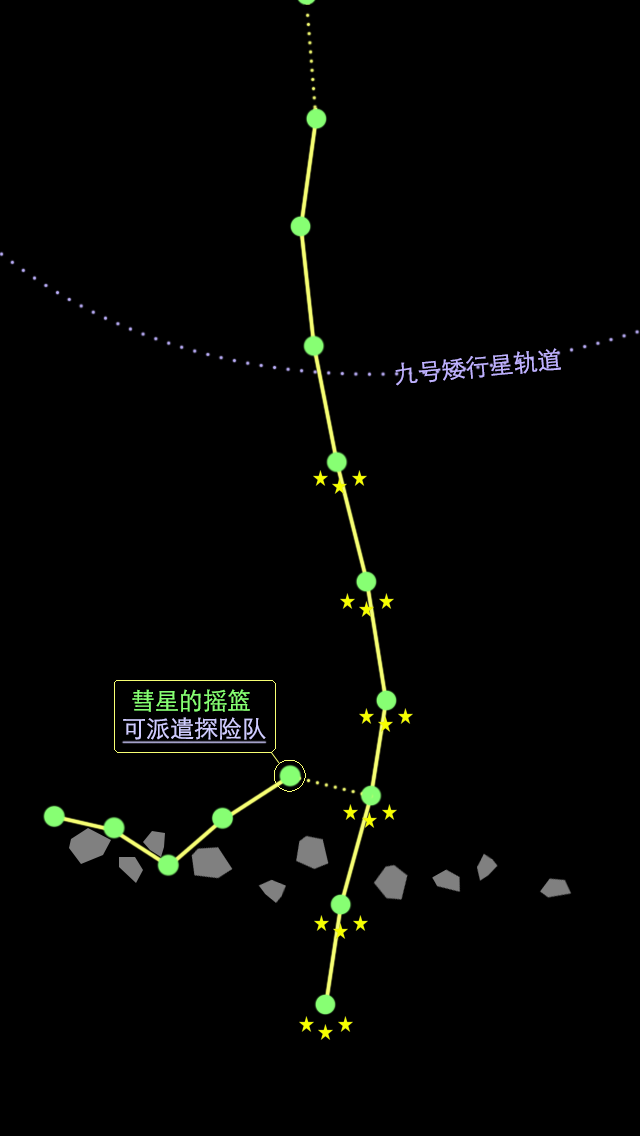
<style>
.page{position:relative;width:640px;height:1136px;background:#000000}
.page>*{position:absolute;margin:0}
.t1{font:24px "STXihei";color:#bfb2ff}
.t2{font:24px "STXihei";color:#87ff73}
.t3{font:24px "STXihei";color:#d0ccff}
</style>
<div class="page">
<p class="t1" style="left:395px;top:348px;width:166px;height:38px;rotate:-5deg">九号矮行星轨道</p>
<p class="t2" style="left:132px;top:689px;width:118px;height:23px">彗星的摇篮</p>
<p class="t3" style="left:123px;top:717px;width:143px;height:23px">可派遣探险队</p>
</div>
